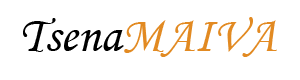
<style>
.page{position:relative;width:300px;height:80px;background:#ffffff}
.page>*{position:absolute;margin:0}
.t1{font:50px "MonotypeCorsiva";color:#000000}
.t2{font:50px "MonotypeCorsiva";color:#e28a22}
</style>
<div class="page">
<p class="t1" style="left:23px;top:17px;width:254px;height:40px">Tsena<span class="t2">MAIVA</span></p>
</div>
